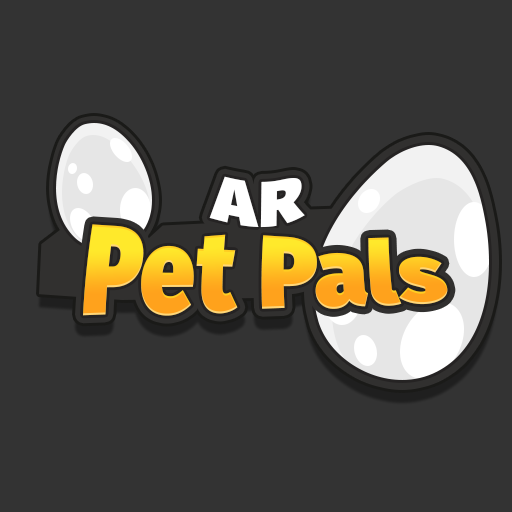
<style>
.page{position:relative;width:512px;height:512px;background:#333333}
.page>*{position:absolute;margin:0}
.t1{font:64.8px "FiraSans-Ultra";letter-spacing:0.025em;color:#ffffff;scale:1.13 1}
.t2{font:77.8px "FiraSans-Ultra";letter-spacing:0.01em;scale:1.25 1}
</style>
<div class="page">
<p class="t1" style="left:209px;top:176px;width:96px;height:52px;rotate:-1deg">AR</p>
<p class="t2" style="left:83px;top:224px;width:365px;height:92px">Pet Pals</p>
</div>
